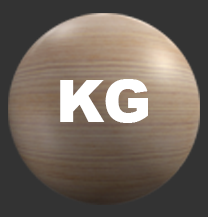
<style>
.page{position:relative;width:208px;height:217px;background:#333333}
.page>*{position:absolute;margin:0}
.t1{font:58.3px "Arial-Black";color:#ffffff}
</style>
<div class="page">
<p class="t1" style="left:60px;top:79px;width:88px;height:44px">KG</p>
</div>
